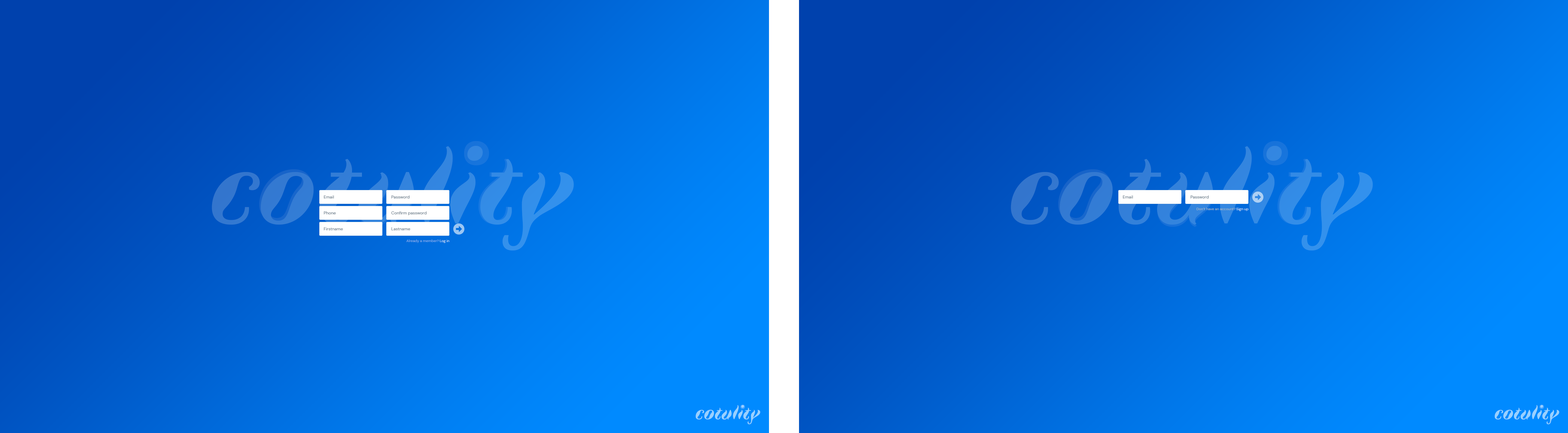
<style>
.page{position:relative;width:1568px;height:433px}
.page>*{position:absolute;margin:0}
.t1{font:108.8px "Faune-DisplayBoldItalic";color:#3386e0}
.t2{font:108.8px "Faune-DisplayBoldItalic";color:#338be6}
.t3{font:108.8px "Faune-DisplayBoldItalic";color:#3379d2}
.t4{font:108.8px "Faune-DisplayBoldItalic"}
.t5{font:4.2px "DMSans-Regular";color:#657786}
.t6{font:3.6px "DMSans-Regular";color:#aab8c2}
.t7{font:3.6px "DMSans-Regular";color:#dde6f8}
.t8{font:3.6px "DMSans-Regular";color:#8db0ec}
.t9{font:3.6px "DMSans-Regular";color:#dde7f9}
.t10{font:19.5px "Faune-DisplayBoldItalic";color:#99d0ff}
.t11{font:8.7px "Faune-DisplayBlack"}
</style>
<div class="page">
<p class="t1" style="left:1011px;top:145px;width:362px;height:105px">cotulity</p>
<p class="t2" style="left:479px;top:158px;width:42px;height:66px">t</p>
<p class="t2" style="left:1278px;top:158px;width:42px;height:66px">t</p>
<p class="t3" style="left:259px;top:169px;width:53px;height:53px">o</p>
<p class="t3" style="left:1058px;top:169px;width:53px;height:53px">o</p>
<p class="t4" style="left:1157px;top:174px;width:57px;height:53px">u</p>
<p class="t5" style="left:324px;top:195px;width:10px;height:3px">Email</p>
<p class="t5" style="left:391px;top:195px;width:18px;height:3px">Password</p>
<p class="t5" style="left:1123px;top:195px;width:10px;height:3px">Email</p>
<p class="t5" style="left:1190px;top:195px;width:19px;height:3px">Password</p>
<p class="t6" style="left:1196px;top:207px;width:39px;height:3px">Don’t have an account?</p>
<p class="t7" style="left:1236px;top:207px;width:13px;height:4px">Sign up</p>
<p class="t5" style="left:324px;top:211px;width:12px;height:3px">Phone</p>
<p class="t5" style="left:391px;top:211px;width:36px;height:4px">Confirm password</p>
<p class="t5" style="left:324px;top:227px;width:19px;height:3px">Firstname</p>
<p class="t5" style="left:391px;top:227px;width:19px;height:3px">Lastname</p>
<p class="t8" style="left:406px;top:239px;width:33px;height:4px">Already a member?</p>
<p class="t9" style="left:440px;top:239px;width:9px;height:4px">Log in</p>
<p class="t10" style="left:696px;top:405px;width:64px;height:19px">cotulity</p>
<p class="t10" style="left:704px;top:409px;width:10px;height:10px">o</p>
<p class="t10" style="left:722px;top:410px;width:10px;height:9px">u</p>
<p class="t11" style="left:740px;top:404px;width:5px;height:5px;rotate:90deg">o</p>
<p class="t10" style="left:743px;top:407px;width:8px;height:12px">t</p>
<p class="t10" style="left:1495px;top:405px;width:64px;height:19px">cotulity</p>
<p class="t10" style="left:1503px;top:409px;width:10px;height:10px">o</p>
<p class="t10" style="left:1521px;top:410px;width:10px;height:9px">u</p>
<p class="t11" style="left:1539px;top:404px;width:5px;height:5px;rotate:90deg">o</p>
<p class="t10" style="left:1542px;top:407px;width:8px;height:12px">t</p>
</div>
